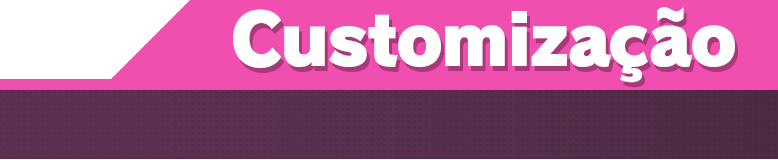
<style>
.page{position:relative;width:778px;height:160px;background:#f14faf}
.page>*{position:absolute;margin:0}
.t1{font:70.7px "RodinPro-UB";letter-spacing:-0.035em;color:#fffeff}
</style>
<div class="page">
<p class="t1" style="left:233px;top:7px;width:502px;height:76px">Customização</p>
</div>
